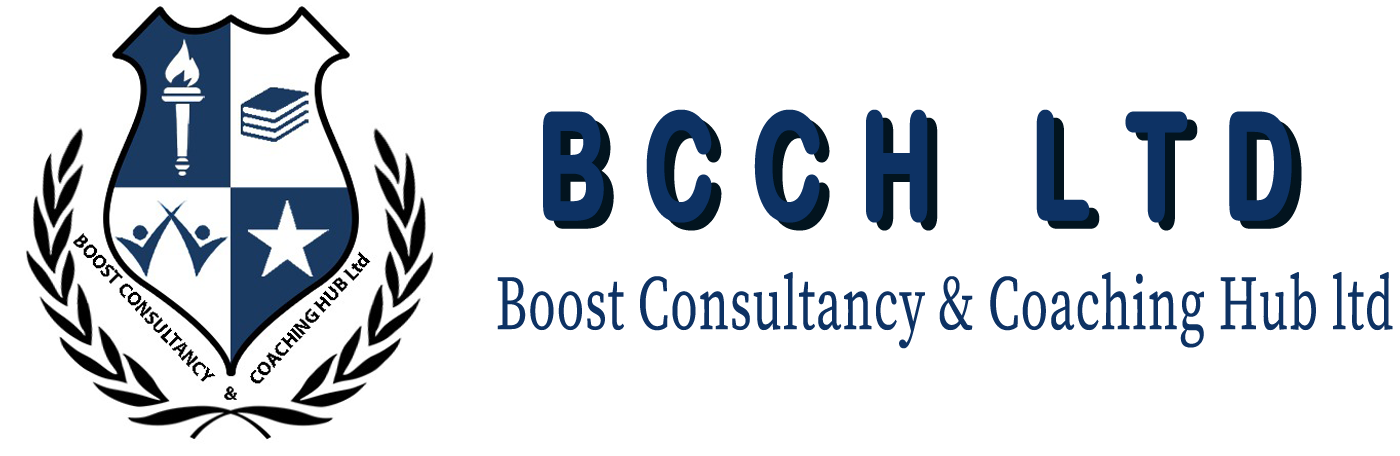
<style>
.page{position:relative;width:1400px;height:456px;background:#ffffff}
.page>*{position:absolute;margin:0}
.t1{font:147.8px "ArialRoundedMTBold";letter-spacing:0.36em;color:#0d3264;font-weight:bold;scale:0.65 1}
.t2{font:147.8px "ArialRoundedMTBold";letter-spacing:0.36em;font-weight:bold;scale:0.65 1}
.t3{font:77px "SourceSerif4Variable-Roman";letter-spacing:0.02em;color:#0d3264;font-weight:bold;scale:0.65 1}
</style>
<div class="page">
<p class="t1" style="left:543px;top:109px;width:749px;height:114px">BCCH LTD</p>
<p class="t2" style="left:553px;top:117px;width:749px;height:114px">BCCH LTD</p>
<p class="t3" style="left:497px;top:272px;width:896px;height:77px">Boost Consultancy &amp; Coaching Hub ltd</p>
</div>
